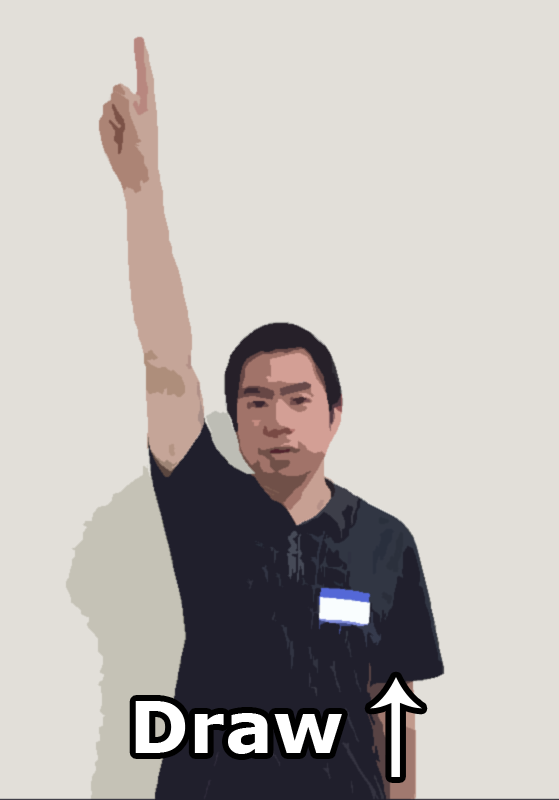
<style>
.page{position:relative;width:559px;height:800px;background:#e2dfd9}
.page>*{position:absolute;margin:0}
.t1{font:72px "Verdana-Bold";color:#ffffff}
</style>
<div class="page">
<p class="t1" style="left:135px;top:701px;width:207px;height:53px">Draw</p>
</div>
